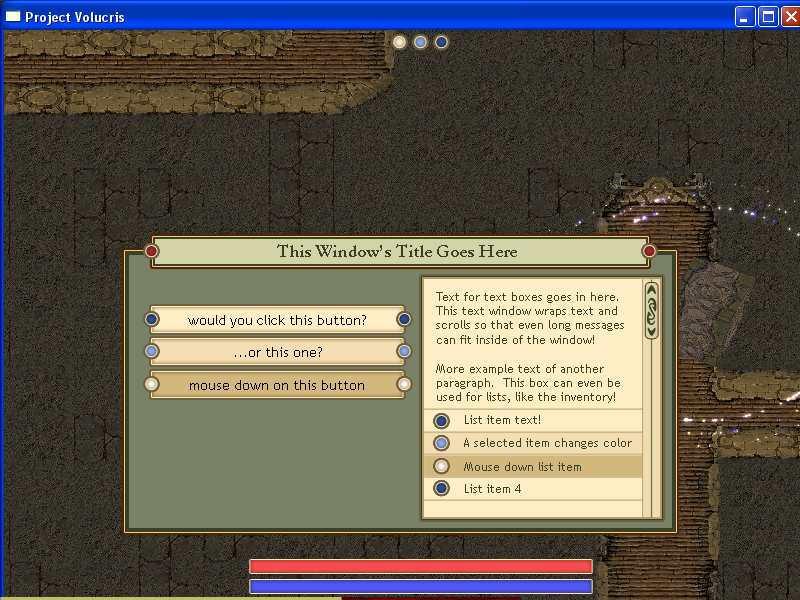
<style>
.page{position:relative;width:800px;height:600px}
.page>*{position:absolute;margin:0}
.t1{font:18px "Garamond-Bold";color:#394026}
.t2{font:12px "TrebuchetMS";color:#394026}
.t3{font:14px "TrebuchetMS";color:#000000}
</style>
<div class="page">
<p class="t1" style="left:277px;top:244px;width:240px;height:13px">This Window’s Title Goes Here</p>
<p class="t2" style="left:436px;top:292px;width:188px;height:111px">Text for text boxes goes in here.  This text window wraps text and scrolls so that even long messages can fit inside of the window!<br><br>More example text of another paragraph.  This box can even be used for lists, like the inventory!</p>
<p class="t3" style="left:188px;top:315px;width:178px;height:13px">would you click this button?</p>
<p class="t3" style="left:235px;top:347px;width:87px;height:10px">...or this one?</p>
<p class="t3" style="left:190px;top:380px;width:174px;height:10px">mouse down on this button</p>
<p class="t2" style="left:465px;top:415px;width:75px;height:9px">List item text!</p>
<p class="t2" style="left:464px;top:438px;width:168px;height:11px">A selected item changes color</p>
<p class="t2" style="left:464px;top:462px;width:117px;height:9px">Mouse down list item</p>
<p class="t2" style="left:465px;top:484px;width:56px;height:9px">List item 4</p>
</div>
